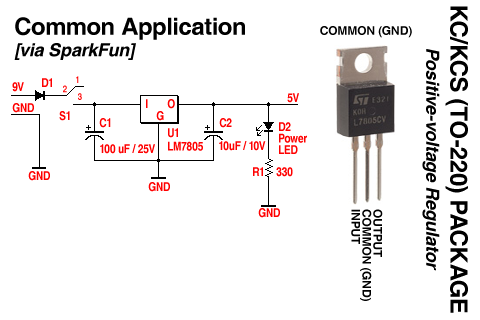
<style>
.page{position:relative;width:480px;height:320px;background:#ffffff}
.page>*{position:absolute;margin:0}
.t1{font:23.7px "Helvetica-Bold";letter-spacing:-0.01em;color:#000000}
.t2{font:23.7px/21.6px "Helvetica-Bold";letter-spacing:-0.01em;color:#000000}
.t3{font:18px/21.6px "Helvetica-BoldOblique";letter-spacing:-0.01em;color:#000000}
.t4{font:12px "Helvetica-Bold";letter-spacing:-0.01em;color:#000000}
.t5{font:18px "Helvetica-BoldOblique";letter-spacing:-0.01em;color:#000000}
.t6{font:12.1px "Helvetica-Narrow-Bold";letter-spacing:-0.01em;color:#ff0000}
.t7{font:9.5px "Helvetica-Narrow-Bold";letter-spacing:-0.01em;color:#ff0000}
.t8{font:12.1px/11.5px "Helvetica-Narrow-Bold";letter-spacing:-0.01em;color:#ff0000}
.t9{font:12.1px/13.5px "Helvetica-Narrow-Bold";letter-spacing:-0.01em;color:#ff0000}
.t10{font:12px/10.9px "Helvetica-Bold";letter-spacing:-0.01em;color:#000000}
</style>
<div class="page">
<p class="t1" style="left:445px;top:6px;width:23px;height:307px;rotate:90deg">KC/KCS (TO-220) PACKAGE</p>
<p class="t2" style="left:14px;top:17px;width:231px;height:43px">Common Application<br><span class="t3">[via SparkFun]</span></p>
<p class="t4" style="left:320px;top:26px;width:92px;height:12px">COMMON (GND)</p>
<p class="t5" style="left:422px;top:49px;width:18px;height:222px;rotate:90deg">Positive-voltage Regulator</p>
<p class="t6" style="left:42px;top:78px;width:10px;height:9px">D1</p>
<p class="t7" style="left:76px;top:76px;width:3px;height:7px">1</p>
<p class="t6" style="left:12px;top:82px;width:12px;height:10px">9V</p>
<p class="t7" style="left:63px;top:85px;width:4px;height:8px">2</p>
<p class="t7" style="left:78px;top:93px;width:4px;height:7px">3</p>
<p class="t6" style="left:146px;top:99px;width:2px;height:9px">I</p>
<p class="t6" style="left:167px;top:99px;width:8px;height:10px">O</p>
<p class="t6" style="left:287px;top:93px;width:12px;height:10px">5V</p>
<p class="t6" style="left:12px;top:103px;width:22px;height:10px">GND</p>
<p class="t6" style="left:59px;top:111px;width:11px;height:10px">S1</p>
<p class="t6" style="left:156px;top:111px;width:8px;height:10px">G</p>
<p class="t6" style="left:99px;top:118px;width:12px;height:10px">C1</p>
<p class="t6" style="left:219px;top:118px;width:13px;height:10px">C2</p>
<p class="t8" style="left:279px;top:122px;width:28px;height:32px">D2<br>Power<br>LED</p>
<p class="t9" style="left:168px;top:128px;width:35px;height:23px">U1<br>LM7805</p>
<p class="t6" style="left:100px;top:144px;width:55px;height:10px">100 uF / 25V</p>
<p class="t6" style="left:219px;top:141px;width:47px;height:10px">10uF / 10V</p>
<p class="t6" style="left:28px;top:171px;width:22px;height:10px">GND</p>
<p class="t6" style="left:253px;top:167px;width:10px;height:9px">R1</p>
<p class="t6" style="left:276px;top:167px;width:17px;height:10px">330</p>
<p class="t6" style="left:148px;top:182px;width:22px;height:10px">GND</p>
<p class="t6" style="left:258px;top:208px;width:22px;height:10px">GND</p>
<p class="t10" style="left:351px;top:209px;width:32px;height:92px;rotate:90deg">OUTPUT<br>COMMON (GND)<br>INPUT</p>
</div>
